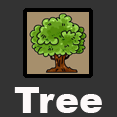
<style>
.page{position:relative;width:117px;height:117px;background:#333333}
.page>*{position:absolute;margin:0}
.t1{font:36px "Arial-Black";color:#fdf9f9}
</style>
<div class="page">
<p class="t1" style="left:14px;top:87px;width:88px;height:26px">Tree</p>
</div>
